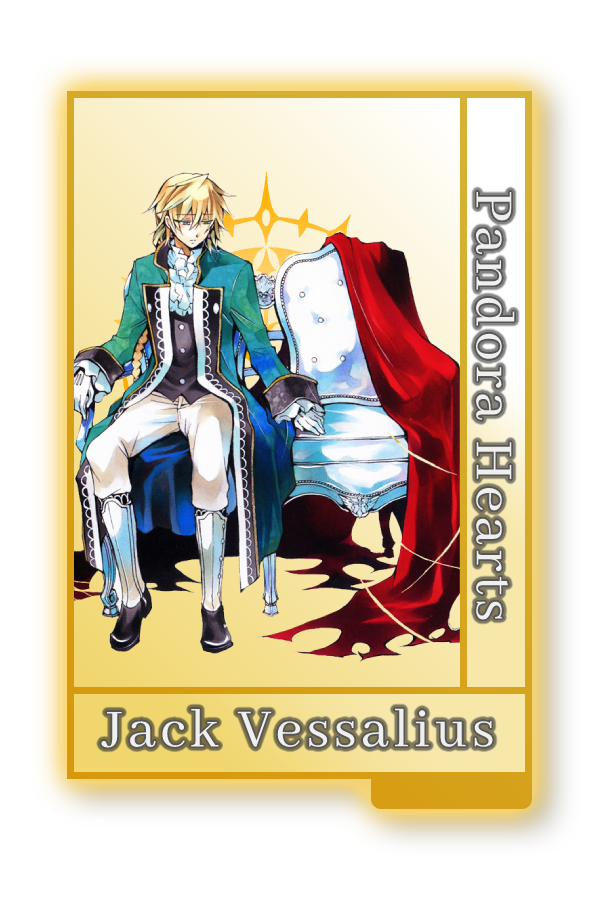
<style>
.page{position:relative;width:600px;height:900px;background:#ffffff}
.page>*{position:absolute;margin:0}
.t1{font:59.1px "AbhayaLibre-Regular";letter-spacing:0.072em;color:#efefef}
.t2{font:59px "AbhayaLibre-Regular";letter-spacing:0.072em;color:#efefef}
</style>
<div class="page">
<p class="t1" style="left:476px;top:192px;width:39px;height:428px;rotate:90deg">Pandora Hearts</p>
<p class="t2" style="left:101px;top:708px;width:392px;height:40px">Jack Vessalius</p>
</div>
